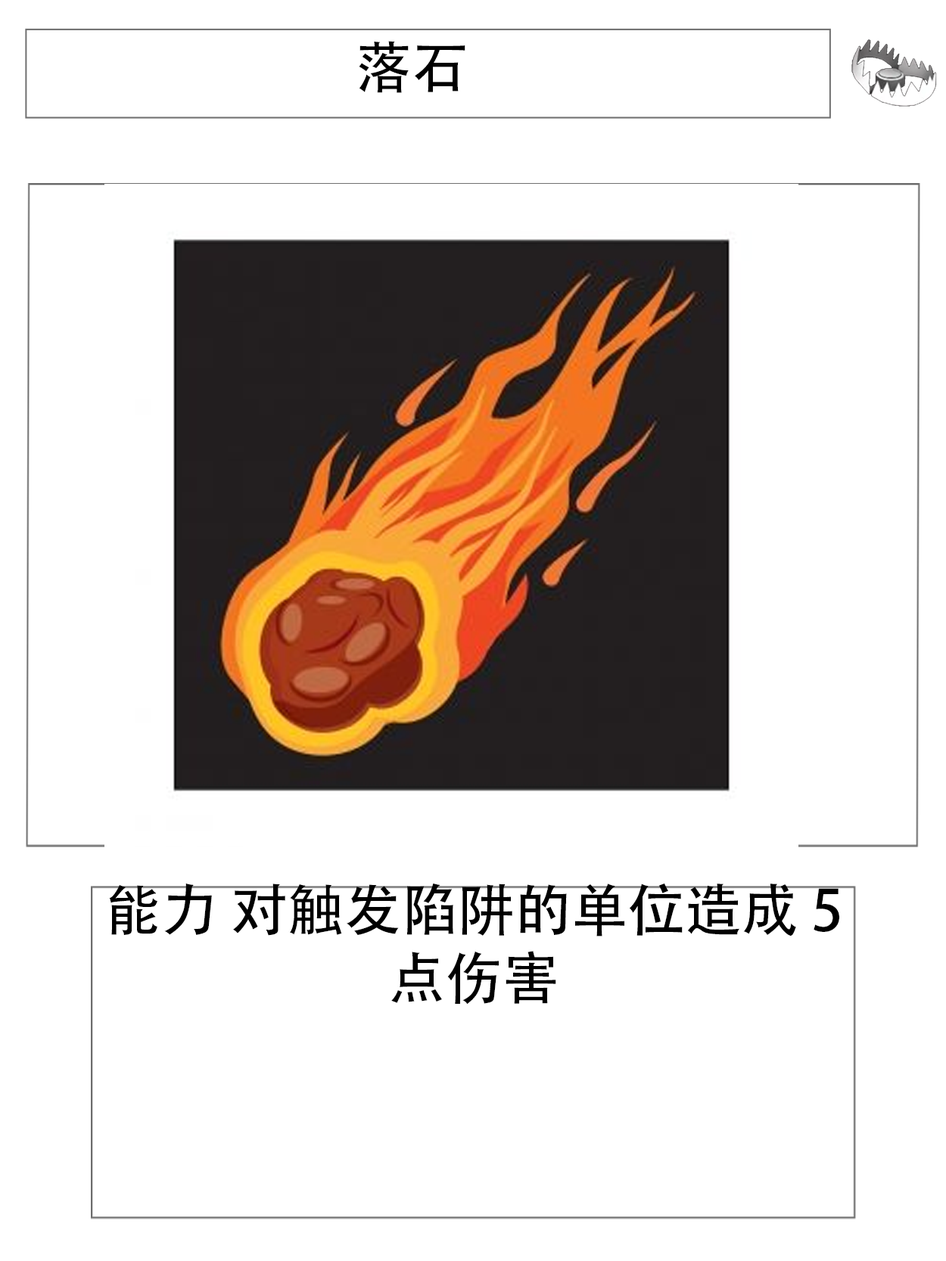
<style>
.page{position:relative;width:946px;height:1261px;background:#ffffff}
.page>*{position:absolute;margin:0}
.t1{font:56.7px "AdobeHeitiStd-Regular";color:#000000}
</style>
<div class="page">
<p class="t1" style="left:359px;top:41px;width:106px;height:52px">落石</p>
<p class="t1" style="left:109px;top:883px;width:730px;height:122px;text-align:center">能力 对触发陷阱的单位造成 5 点伤害</p>
</div>
